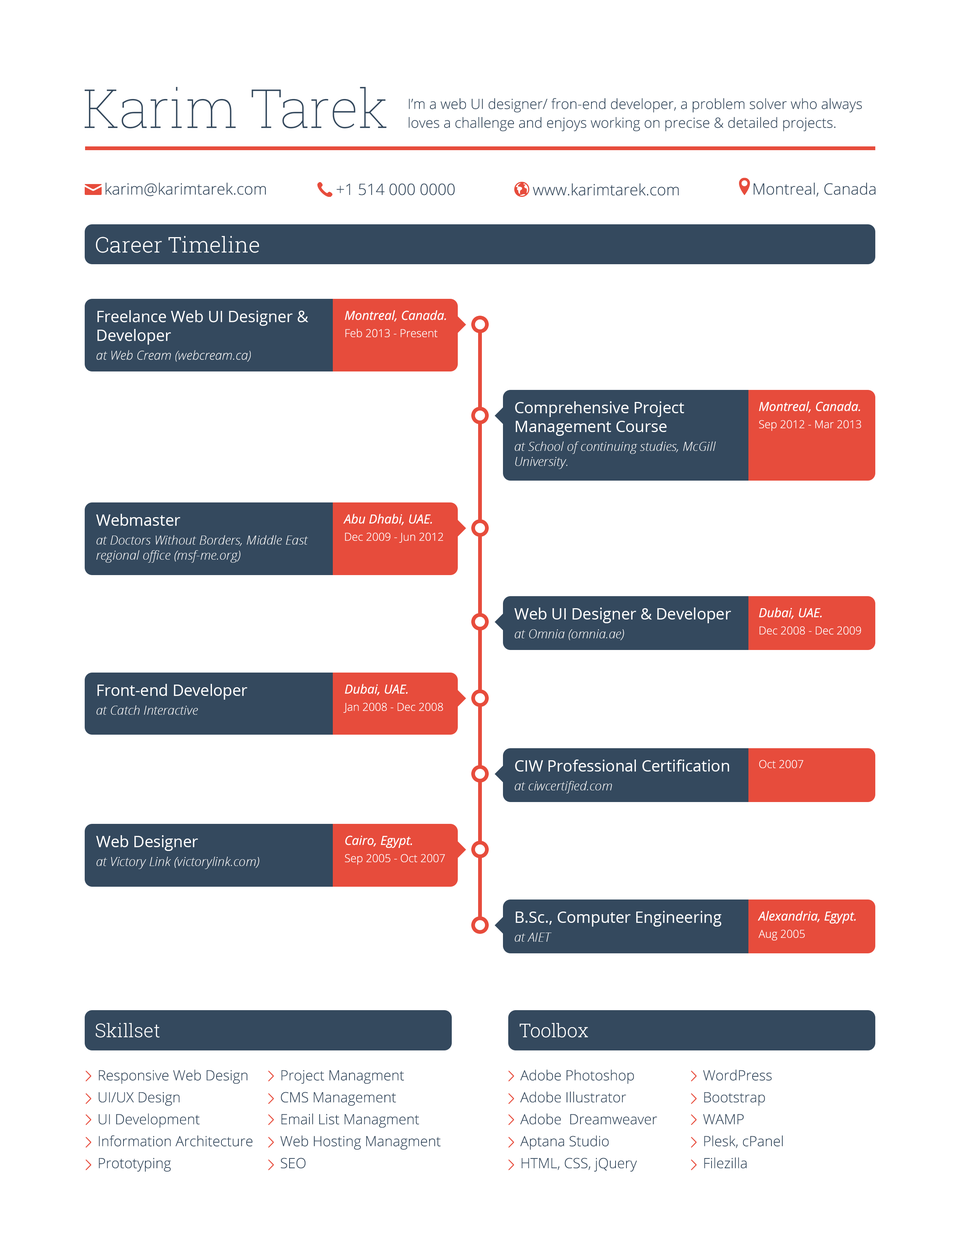
<style>
.page{position:relative;width:960px;height:1242px;background:#ffffff}
.page>*{position:absolute;margin:0}
.t1{font:53.3px "RobotoSlab-Thin";color:#34495e}
.t2{font:14.1px/18.8px "OpenSans-Light";color:#34495e}
.t3{font:15.7px "OpenSans-Light";color:#34495e}
.t4{font:22px "RobotoSlab-Light";color:#ffffff}
.t5{font:15.7px "OpenSans";color:#ffffff}
.t6{font:12.5px/18.8px "OpenSansLight-Italic";color:#ffffff}
.t7{font:11px/17.3px "OpenSans-Light";color:#ffffff}
.t8{font:12.5px/17.3px "OpenSans-Italic";color:#ffffff}
.t9{font:12.5px "OpenSansLight-Italic";color:#ffffff}
.t10{font:15.7px/22px "OpenSans";color:#ffffff}
.t11{font:11px "OpenSans-Light";color:#ffffff}
.t12{font:18.8px "RobotoSlab-Light";color:#ffffff}
.t13{font:14.1px/22px "OpenSans-Light";color:#34495e}
</style>
<div class="page">
<p class="t1" style="left:84px;top:87px;width:303px;height:41px">Karim Tarek</p>
<p class="t2" style="left:408px;top:98px;width:454px;height:33px">I’m a web UI designer/ fron-end developer, a problem solver who always loves a challenge and enjoys working on precise &amp; detailed projects.</p>
<p class="t3" style="left:105px;top:183px;width:161px;height:13px">karim@karimtarek.com</p>
<p class="t3" style="left:337px;top:183px;width:118px;height:12px">+1 514 000 0000</p>
<p class="t3" style="left:533px;top:183px;width:146px;height:13px">www.karimtarek.com</p>
<p class="t3" style="left:754px;top:183px;width:122px;height:14px">Montreal, Canada</p>
<p class="t4" style="left:96px;top:236px;width:163px;height:17px">Career Timeline</p>
<p class="t5" style="left:96px;top:310px;width:212px;height:52px">Freelance Web UI Designer &amp; Developer <br><span class="t6">at Web Cream (webcream.ca)</span></p>
<p class="t7" style="left:345px;top:310px;width:101px;height:27px"><span class="t8">Montreal, Canada.<br></span>Feb 2013 - Present</p>
<p class="t5" style="left:515px;top:401px;width:201px;height:68px">Comprehensive Project Management Course<br><span class="t6">at School of continuing studies, McGill </span><span class="t9">University.</span></p>
<p class="t7" style="left:759px;top:401px;width:102px;height:30px"><span class="t8">Montreal, Canada.<br></span>Sep 2012 - Mar 2013</p>
<p class="t6" style="left:96px;top:514px;width:212px;height:49px"><span class="t10">Webmaster<br></span>at Doctors Without Borders, Middle East <span class="t9">regional office (msf-me.org)</span></p>
<p class="t7" style="left:343px;top:514px;width:100px;height:29px"><span class="t8">Abu Dhabi, UAE.<br></span>Dec 2009 - Jun 2012</p>
<p class="t5" style="left:514px;top:608px;width:217px;height:32px">Web UI Designer &amp; Developer <br><span class="t6">at Omnia (omnia.ae)</span></p>
<p class="t7" style="left:759px;top:608px;width:102px;height:27px"><span class="t8">Dubai, UAE.<br></span>Dec 2008 - Dec 2009</p>
<p class="t6" style="left:96px;top:684px;width:151px;height:31px"><span class="t5">Front-end Developer<br></span>at Catch Interactive</p>
<p class="t7" style="left:343px;top:684px;width:100px;height:29px"><span class="t8">Dubai, UAE.<br></span>Jan 2008 - Dec 2008</p>
<p class="t5" style="left:515px;top:760px;width:214px;height:34px">CIW Professional Certification<br><span class="t6">at ciwcertified.com</span></p>
<p class="t11" style="left:759px;top:760px;width:44px;height:8px">Oct 2007</p>
<p class="t6" style="left:96px;top:835px;width:163px;height:34px"><span class="t5">Web Designer<br></span>at Victory Link (victorylink.com)</p>
<p class="t7" style="left:345px;top:836px;width:100px;height:29px"><span class="t8">Cairo, Egypt.<br></span>Sep 2005 - Oct 2007</p>
<p class="t5" style="left:515px;top:911px;width:206px;height:31px">B.Sc., Computer Engineering<br><span class="t6">at AIET</span></p>
<p class="t8" style="left:758px;top:911px;width:98px;height:30px">Alexandria, Egypt.<br><span class="t7">Aug 2005</span></p>
<p class="t12" style="left:96px;top:1023px;width:64px;height:15px">Skillset</p>
<p class="t12" style="left:519px;top:1023px;width:69px;height:15px">Toolbox</p>
<p class="t13" style="left:99px;top:1070px;width:154px;height:102px">Responsive Web Design<br>UI/UX Design<br>UI Development<br>Information Architecture<br>Prototyping</p>
<p class="t13" style="left:280px;top:1070px;width:161px;height:99px">Project Managment<br>CMS Management<br>Email List Managment<br>Web Hosting Managment<br>SEO</p>
<p class="t13" style="left:520px;top:1070px;width:137px;height:102px">Adobe Photoshop<br>Adobe Illustrator<br>Adobe  Dreamweaver<br>Aptana Studio<br>HTML, CSS, jQuery</p>
<p class="t13" style="left:703px;top:1070px;width:80px;height:99px">WordPress<br>Bootstrap<br>WAMP<br>Plesk, cPanel<br>Filezilla</p>
</div>
